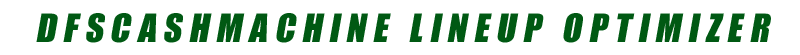
<style>
.page{position:relative;width:800px;height:55px;background:#ffffff}
.page>*{position:absolute;margin:0}
.t1{font:36px "Impact";letter-spacing:0.2em;color:#005913;font-style:italic}
</style>
<div class="page">
<p class="t1" style="left:36px;top:13px;width:735px;height:30px">DFSCASHMACHINE LINEUP OPTIMIZER</p>
</div>
